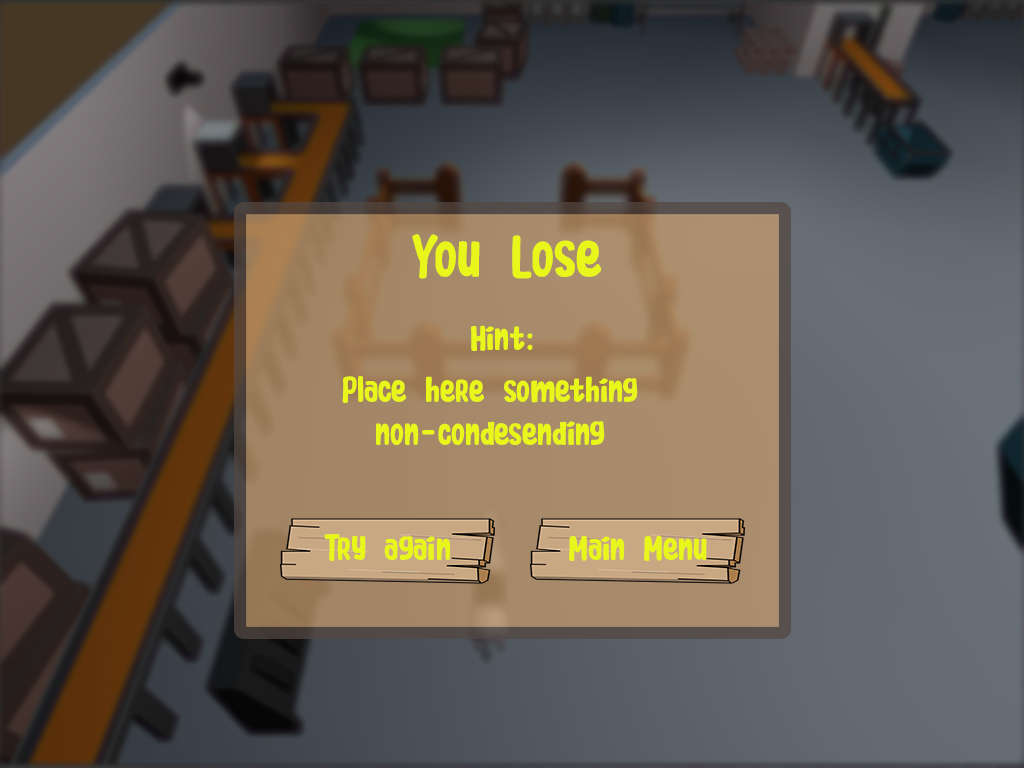
<style>
.page{position:relative;width:1024px;height:768px}
.page>*{position:absolute;margin:0}
.t1{font:60px "CoconutCookies";color:#e9f61c}
.t2{font:36px "CoconutCookies";color:#e9f61c}
</style>
<div class="page">
<p class="t1" style="left:412px;top:234px;width:190px;height:45px">You Lose</p>
<p class="t2" style="left:471px;top:325px;width:62px;height:26px">Hint:</p>
<p class="t2" style="left:342px;top:376px;width:296px;height:69px;text-align:center">Place here something non-condesending</p>
<p class="t2" style="left:324px;top:534px;width:127px;height:27px">Try again</p>
<p class="t2" style="left:569px;top:535px;width:138px;height:26px">Main Menu</p>
</div>
